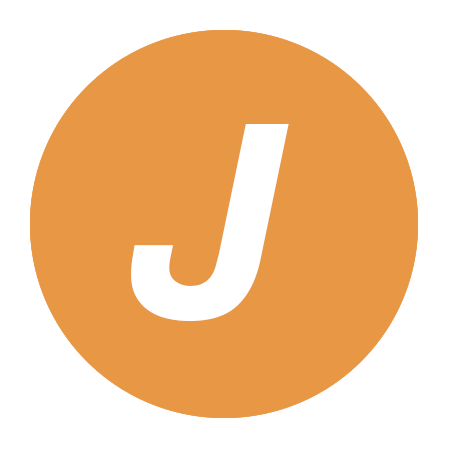
<style>
.page{position:relative;width:456px;height:456px;background:#e89744}
.page>*{position:absolute;margin:0}
.t1{font:270px "HelveticaNeue-BoldItalic";letter-spacing:0.003em;color:#ffffff}
</style>
<div class="page">
<p class="t1" style="left:131px;top:124px;width:158px;height:197px">J</p>
</div>
